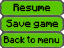
<style>
.page{position:relative;width:64px;height:48px;background:#59c600}
.page>*{position:absolute;margin:0}
.t1{font:8.3px "Minecraft";color:#000000}
.t2{font:7.5px "Minecraft";color:#000000}
</style>
<div class="page">
<p class="t1" style="left:13px;top:3px;width:38px;height:9px">Resume</p>
<p class="t1" style="left:6px;top:19px;width:52px;height:10px">Save game</p>
<p class="t2" style="left:3px;top:36px;width:57px;height:8px">Back to menu</p>
</div>
